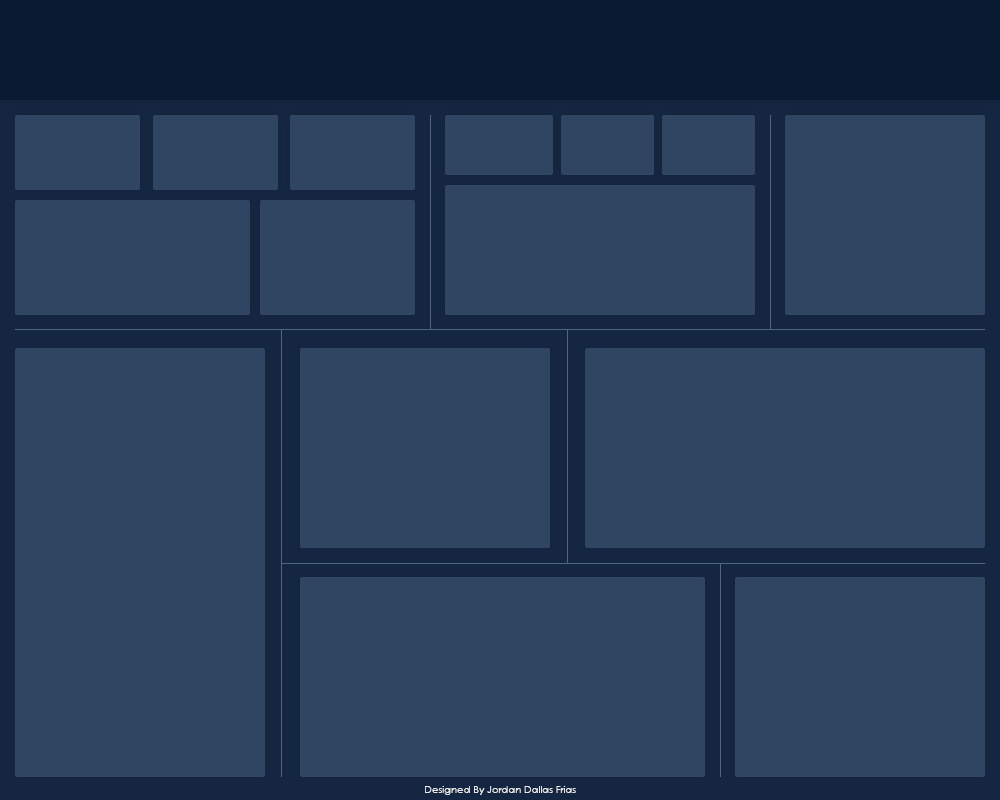
<style>
.page{position:relative;width:1000px;height:800px;background:#2f4562}
.page>*{position:absolute;margin:0}
.t1{font:10.4px "CenturyGothic";letter-spacing:-0.02em;color:#e9e9e9}
</style>
<div class="page">
<p class="t1" style="left:425px;top:786px;width:151px;height:9px">Designed By Jordan Dallas Frias</p>
</div>
